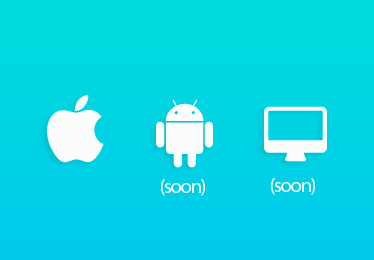
<style>
.page{position:relative;width:374px;height:260px}
.page>*{position:absolute;margin:0}
.t1{font:20.3px "MyriadPro-Regular";letter-spacing:-0.06em;color:#fbfdfd}
</style>
<div class="page">
<p class="t1" style="left:161px;top:179px;width:44px;height:17px">(soon)</p>
<p class="t1" style="left:271px;top:178px;width:44px;height:17px">(soon)</p>
</div>
